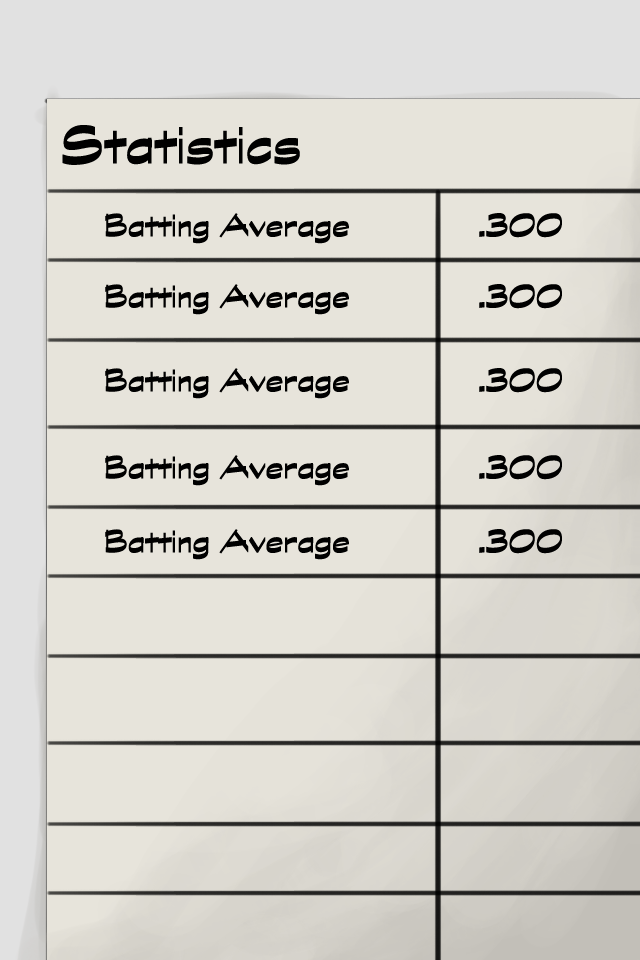
<style>
.page{position:relative;width:640px;height:960px;background:#e7e4db}
.page>*{position:absolute;margin:0}
.t1{font:60px "GraphiteStd-Bold";color:#000000}
.t2{font:36px "GraphiteStd-Bold";color:#000000}
</style>
<div class="page">
<p class="t1" style="left:62px;top:125px;width:238px;height:40px">Statistics</p>
<p class="t2" style="left:105px;top:213px;width:244px;height:31px">Batting Average</p>
<p class="t2" style="left:479px;top:213px;width:83px;height:25px">.300</p>
<p class="t2" style="left:105px;top:284px;width:244px;height:31px">Batting Average</p>
<p class="t2" style="left:479px;top:284px;width:83px;height:25px">.300</p>
<p class="t2" style="left:105px;top:368px;width:244px;height:31px">Batting Average</p>
<p class="t2" style="left:479px;top:368px;width:83px;height:25px">.300</p>
<p class="t2" style="left:105px;top:455px;width:244px;height:31px">Batting Average</p>
<p class="t2" style="left:479px;top:455px;width:83px;height:25px">.300</p>
<p class="t2" style="left:105px;top:529px;width:244px;height:31px">Batting Average</p>
<p class="t2" style="left:479px;top:529px;width:83px;height:25px">.300</p>
</div>
